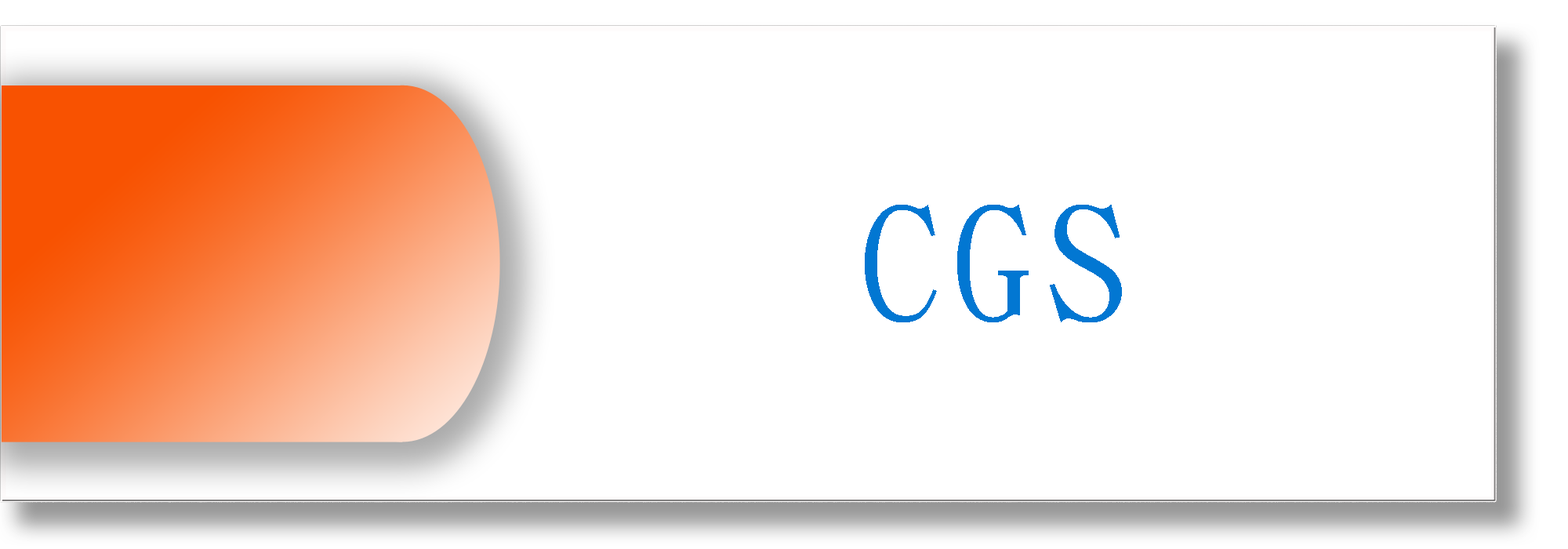
<style>
.page{position:relative;width:1568px;height:549px;background:#ffffff}
.page>*{position:absolute;margin:0}
.t1{font:156.8px "DFKaiShu-SB-Estd-BF";letter-spacing:0.08em;color:#0277d2}
</style>
<div class="page">
<p class="t1" style="left:865px;top:205px;width:257px;height:117px">CGS</p>
</div>
